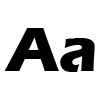
<style>
.page{position:relative;width:100px;height:100px;background:#ffffff}
.page>*{position:absolute;margin:0}
.t1{font:64px "ErasITC-Bold";color:#000000}
</style>
<div class="page">
<p class="t1" style="left:4px;top:28px;width:91px;height:44px">Aa</p>
</div>
